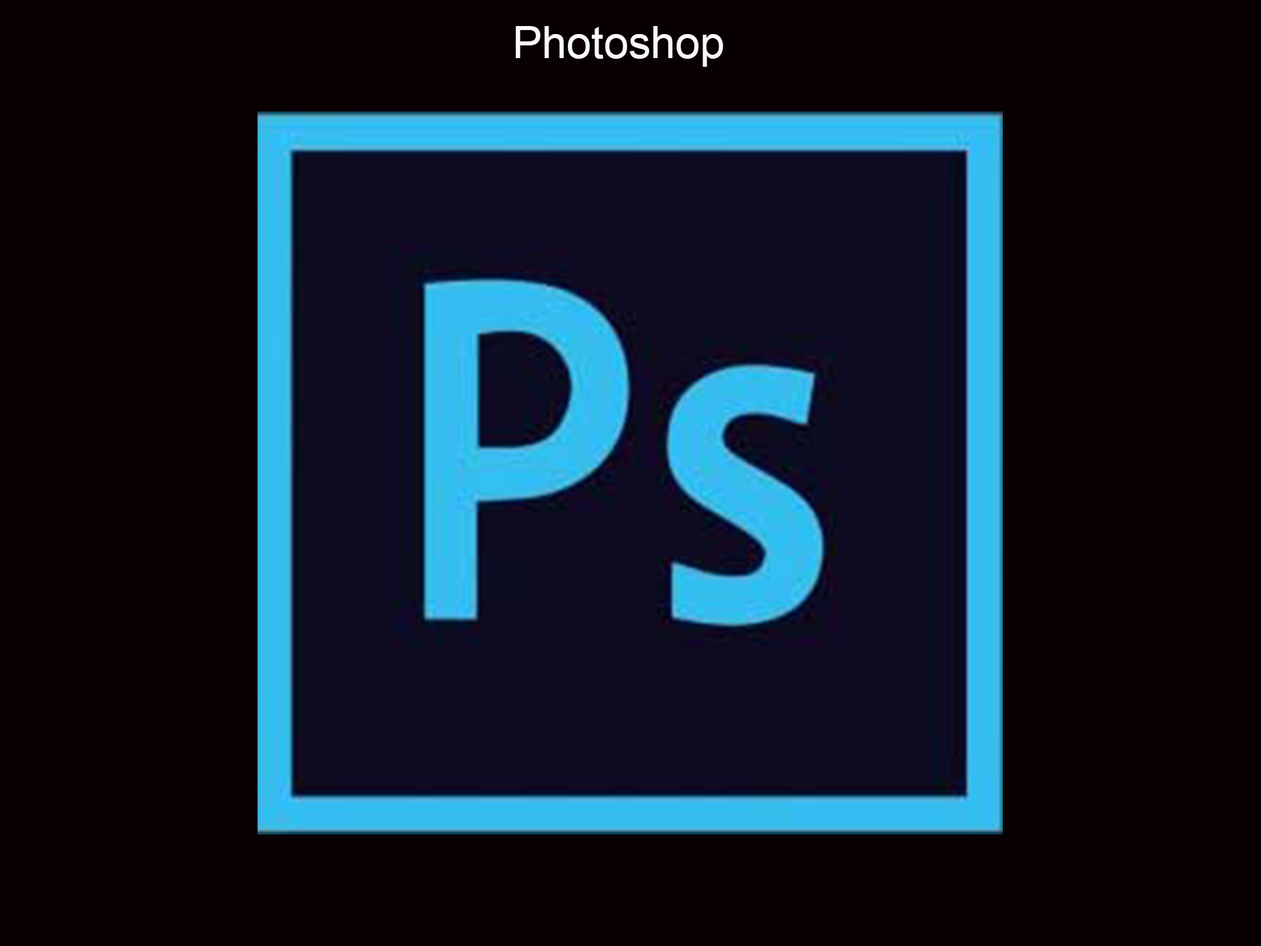
<style>
.page{position:relative;width:1261px;height:946px;background:#080003}
.page>*{position:absolute;margin:0}
.t1{font:44.5px "ArialMT";color:#fcf9fb}
</style>
<div class="page">
<p class="t1" style="left:516px;top:26px;width:207px;height:41px">Photoshop</p>
</div>
